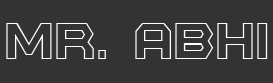
<style>
.page{position:relative;width:273px;height:83px;background:#333333}
.page>*{position:absolute;margin:0}
.t1{font:60.4px "BatmanForeverOutline";color:#ffffff;scale:0.8 1}
</style>
<div class="page">
<p class="t1" style="left:6px;top:23px;width:262px;height:36px">MR. ABHI</p>
</div>
